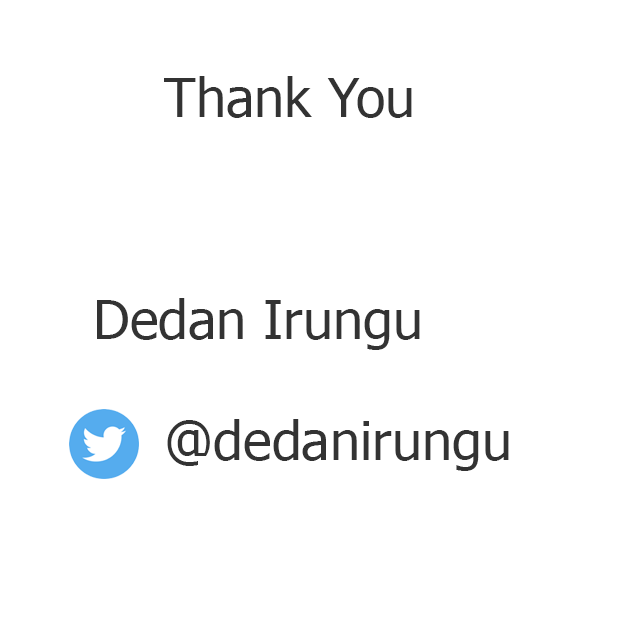
<style>
.page{position:relative;width:624px;height:644px;background:#ffffff}
.page>*{position:absolute;margin:0}
.t1{font:54px "Tahoma";color:#333333}
</style>
<div class="page">
<p class="t1" style="left:164px;top:76px;width:248px;height:42px">Thank You</p>
<p class="t1" style="left:97px;top:298px;width:323px;height:52px">Dedan Irungu</p>
<p class="t1" style="left:167px;top:419px;width:342px;height:52px">@dedanirungu</p>
</div>
